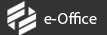
<style>
.page{position:relative;width:107px;height:35px;background:#333333}
.page>*{position:absolute;margin:0}
.t1{font:16px "MyriadPro-Regular";color:#ffffff}
</style>
<div class="page">
<p class="t1" style="left:44px;top:12px;width:53px;height:12px">e-Office</p>
</div>
